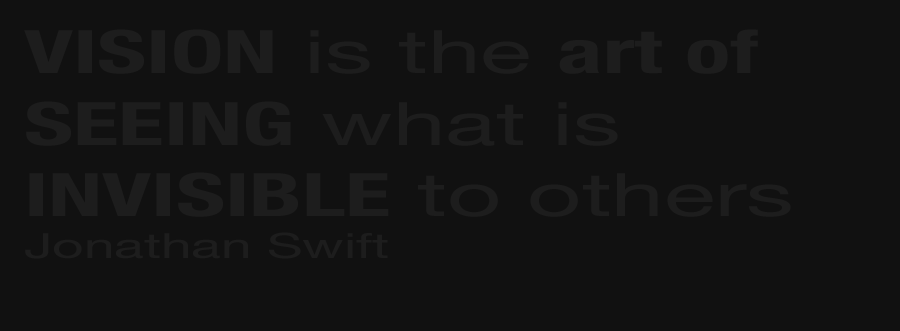
<style>
.page{position:relative;width:900px;height:331px;background:#111111}
.page>*{position:absolute;margin:0}
.t1{font:59.6px "HelveticaNeue-CondensedBold";color:#1d1d1d;scale:1.58 1}
.t2{font:59.6px "HelveticaNeue";color:#1d1d1d;scale:1.58 1}
.t3{font:34.6px "HelveticaNeue";color:#1d1d1d;scale:1.58 1}
</style>
<div class="page">
<p class="t1" style="left:24px;top:29px;width:767px;height:230px">VISION<span class="t2"> is the </span>art of <br>SEEING<span class="t2"> what is <br></span>INVISIBLE<span class="t2"> to others <br></span><span class="t3">Jonathan Swift</span></p>
</div>
